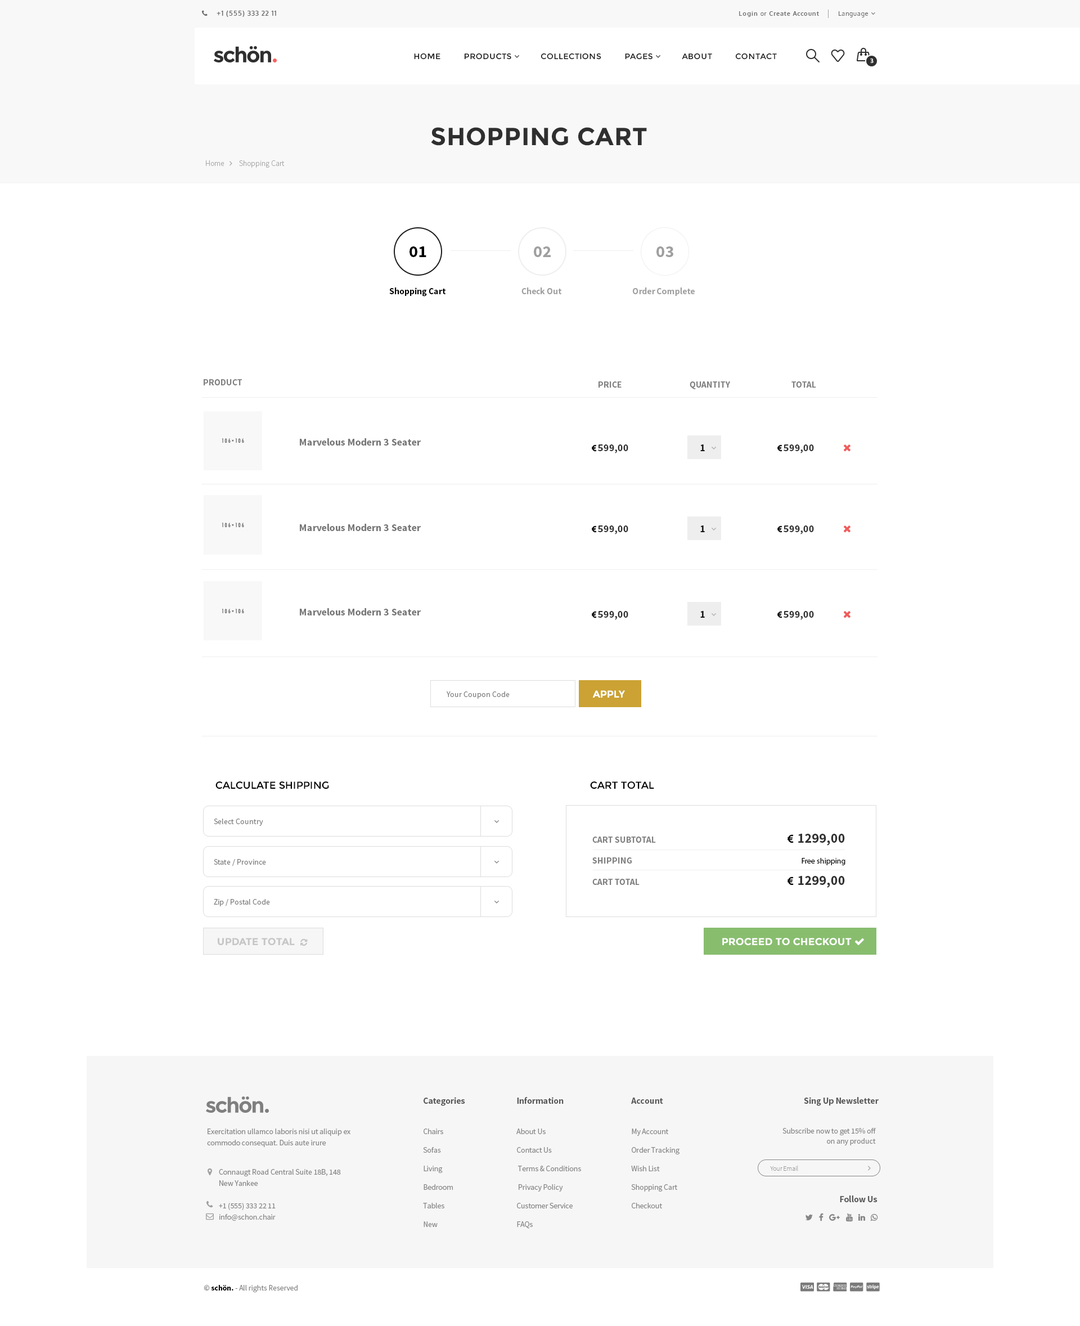
<style>
.page{position:relative;width:1080px;height:1326px;background:#ffffff}
.page>*{position:absolute;margin:0}
.t1{font:6.2px "Oxygen-Bold";letter-spacing:0.08em;color:#696969}
.t2{font:6.2px "Oxygen-Regular";letter-spacing:0.08em;color:#696969}
.t3{font:6.2px "MyriadPro-Semibold";letter-spacing:0.08em;color:#ffffff}
.t4{font:24.8px "Montserrat-Bold";letter-spacing:0.02em;color:#2f2f2f}
.t5{font:16.9px "SourceSansPro-Bold";color:#000000}
.t6{font:16.9px "SourceSansPro-Bold";color:#9f9f9f}
.t7{font:9px "SourceSansPro-Bold";color:#000000}
.t8{font:9px "SourceSansPro-Bold";color:#9f9f9f}
.t9{font:9px "SourceSansPro-Bold";color:#808080}
.t10{font:10.1px "SourceSansPro-Bold";color:#757575}
.t11{font:10.1px "SourceSansPro-Bold";letter-spacing:0.04em;color:#181818}
.t12{font:7.9px "SourceSansPro-Regular";color:#7d7d7d}
.t13{font:10.1px "Montserrat-Bold";color:#ffffff}
.t14{font:10.1px "Montserrat-Regular";color:#000000}
.t15{font:7.9px "MyriadPro-Regular";color:#010101}
.t16{font:9px "SourceSansPro-Bold";letter-spacing:-0.01em;color:#575757}
.t17{font:7.9px/11.3px "SourceSansPro-Regular";letter-spacing:-0.01em;color:#868686}
.t18{font:7.9px/18.6px "SourceSansPro-Regular";letter-spacing:-0.01em;color:#868686}
.t19{font:7.9px/10.1px "SourceSansPro-Regular";letter-spacing:-0.01em;color:#868686}
.t20{font:6.8px "SourceSansPro-ExtraLight";letter-spacing:-0.01em;color:#8c8c8c}
.t21{font:7.9px "SourceSansPro-Regular";letter-spacing:-0.01em;color:#868686}
.t22{font:7.9px "SourceSansPro-Bold";letter-spacing:-0.01em;color:#868686}
.t23{font:7.9px "SourceSansPro-Bold";letter-spacing:-0.01em;color:#000000}
</style>
<div class="page">
<p class="t1" style="left:739px;top:11px;width:80px;height:6px">Login<span class="t2"> or </span>Create Account</p>
<p class="t3" style="left:870px;top:58px;width:4px;height:5px">3</p>
<p class="t4" style="left:431px;top:127px;width:216px;height:19px">SHOPPING CART</p>
<p class="t5" style="left:410px;top:246px;width:16px;height:11px">01</p>
<p class="t6" style="left:534px;top:246px;width:17px;height:11px">02</p>
<p class="t6" style="left:656px;top:246px;width:17px;height:11px">03</p>
<p class="t7" style="left:389px;top:287px;width:57px;height:9px">Shopping Cart</p>
<p class="t8" style="left:521px;top:287px;width:41px;height:7px">Check Out</p>
<p class="t8" style="left:633px;top:287px;width:62px;height:9px">Order Complete</p>
<p class="t9" style="left:204px;top:379px;width:38px;height:6px">PRODUCT</p>
<p class="t9" style="left:598px;top:381px;width:24px;height:7px">PRICE</p>
<p class="t9" style="left:690px;top:381px;width:41px;height:8px">QUANTITY</p>
<p class="t9" style="left:791px;top:381px;width:25px;height:7px">TOTAL</p>
<p class="t10" style="left:300px;top:438px;width:121px;height:8px">Marvelous Modern 3 Seater</p>
<p class="t11" style="left:700px;top:444px;width:5px;height:7px">1</p>
<p class="t10" style="left:300px;top:524px;width:121px;height:7px">Marvelous Modern 3 Seater</p>
<p class="t11" style="left:700px;top:525px;width:5px;height:7px">1</p>
<p class="t10" style="left:300px;top:608px;width:121px;height:7px">Marvelous Modern 3 Seater</p>
<p class="t11" style="left:700px;top:611px;width:5px;height:7px">1</p>
<p class="t12" style="left:447px;top:691px;width:63px;height:8px">Your Coupon Code</p>
<p class="t13" style="left:592px;top:690px;width:33px;height:8px">APPLY</p>
<p class="t14" style="left:215px;top:781px;width:114px;height:8px">CALCULATE SHIPPING</p>
<p class="t14" style="left:590px;top:781px;width:64px;height:8px">CART TOTAL</p>
<p class="t12" style="left:214px;top:818px;width:49px;height:8px">Select Country</p>
<p class="t9" style="left:592px;top:836px;width:64px;height:7px">CART SUBTOTAL</p>
<p class="t9" style="left:592px;top:857px;width:40px;height:6px">SHIPPING</p>
<p class="t15" style="left:802px;top:858px;width:43px;height:7px">Free shipping</p>
<p class="t12" style="left:214px;top:859px;width:52px;height:7px">State / Province</p>
<p class="t9" style="left:592px;top:879px;width:48px;height:6px">CART TOTAL</p>
<p class="t12" style="left:214px;top:899px;width:56px;height:7px">Zip / Postal Code</p>
<p class="t16" style="left:424px;top:1097px;width:41px;height:9px">Categories</p>
<p class="t16" style="left:517px;top:1097px;width:47px;height:7px">Information</p>
<p class="t16" style="left:631px;top:1097px;width:32px;height:7px">Account</p>
<p class="t16" style="left:804px;top:1097px;width:75px;height:9px">Sing Up Newsletter</p>
<p class="t17" style="left:207px;top:1128px;width:143px;height:19px">Exercitation ullamco laboris nisi ut aliquip ex<br>commodo consequat. Duis aute irure</p>
<p class="t18" style="left:423px;top:1128px;width:30px;height:99px">Chairs<br>Sofas<br>Living<br>Bedroom<br>Tables<br>New</p>
<p class="t18" style="left:516px;top:1128px;width:65px;height:100px">About Us<br>Contact Us<br> Terms &amp; Conditions<br> Privacy Policy<br>Customer Service<br>FAQs</p>
<p class="t18" style="left:631px;top:1128px;width:49px;height:80px">My Account<br>Order Tracking<br>Wish List<br>Shopping Cart<br>Checkout</p>
<p class="t19" style="left:782px;top:1128px;width:94px;height:17px;text-align:right">Subscribe now to get 15% off<br>on any product</p>
<p class="t17" style="left:219px;top:1169px;width:122px;height:52px">Connaugt Road Central Suite 18B, 148<br>New Yankee<br><br>+1 (555) 333 22 11<br>info@schon.chair</p>
<p class="t20" style="left:770px;top:1166px;width:28px;height:5px">Your Email</p>
<p class="t16" style="left:840px;top:1195px;width:38px;height:7px">Follow Us</p>
<p class="t21" style="left:204px;top:1285px;width:94px;height:7px"><span class="t22">©</span><span class="t23"> schön. </span>- All rights Reserved</p>
</div>
